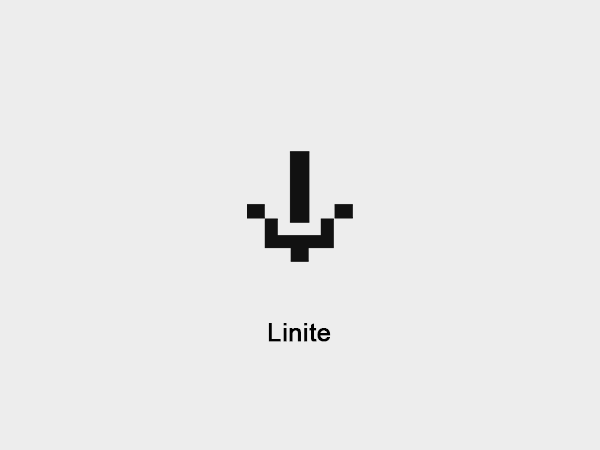
<style>
.page{position:relative;width:600px;height:450px;background:#ededed}
.page>*{position:absolute;margin:0}
.t1{font:25px "ArialMT";color:#000000;font-weight:bold}
</style>
<div class="page">
<p class="t1" style="left:268px;top:323px;width:63px;height:19px">Linite</p>
</div>
